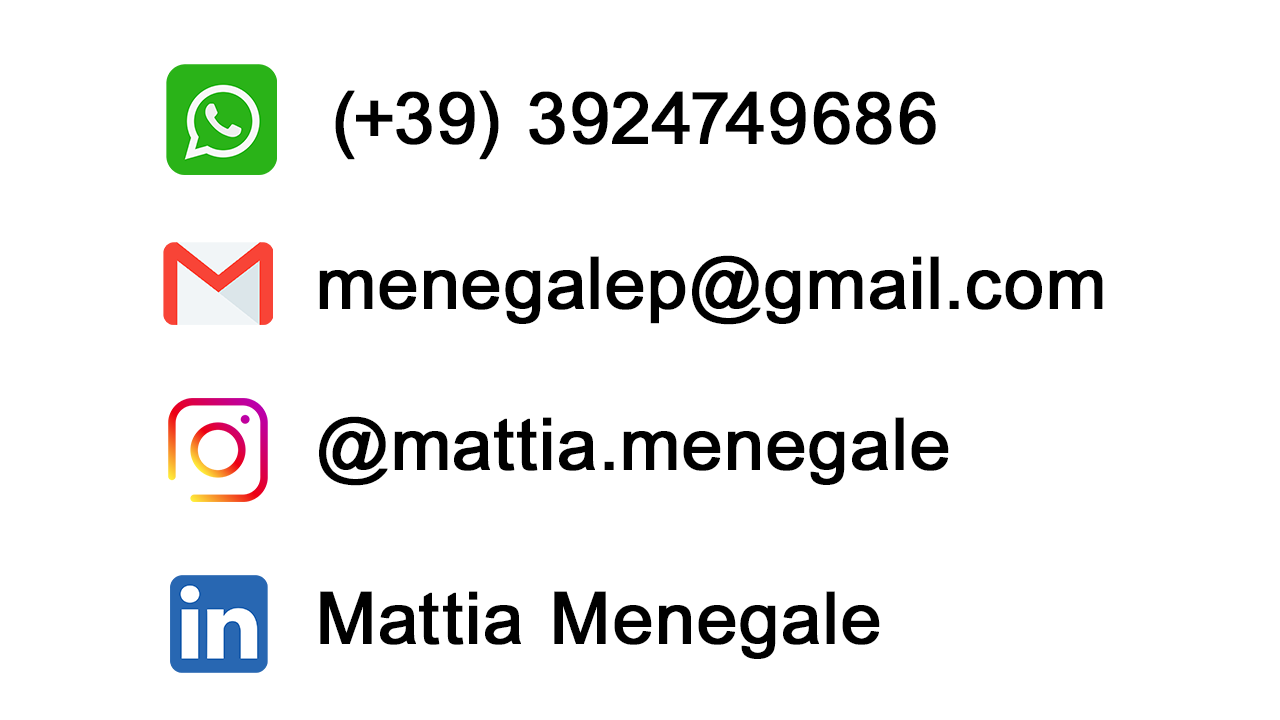
<style>
.page{position:relative;width:1280px;height:720px;background:#ffffff}
.page>*{position:absolute;margin:0}
.t1{font:72px "ArialMT";letter-spacing:0.025em;color:#000000;font-weight:bold}
</style>
<div class="page">
<p class="t1" style="left:335px;top:90px;width:601px;height:70px">(+39) 3924749686</p>
<p class="t1" style="left:319px;top:255px;width:784px;height:70px">menegalep@gmail.com</p>
<p class="t1" style="left:319px;top:416px;width:630px;height:70px">@mattia.menegale</p>
<p class="t1" style="left:320px;top:591px;width:560px;height:68px">Mattia Menegale</p>
</div>
